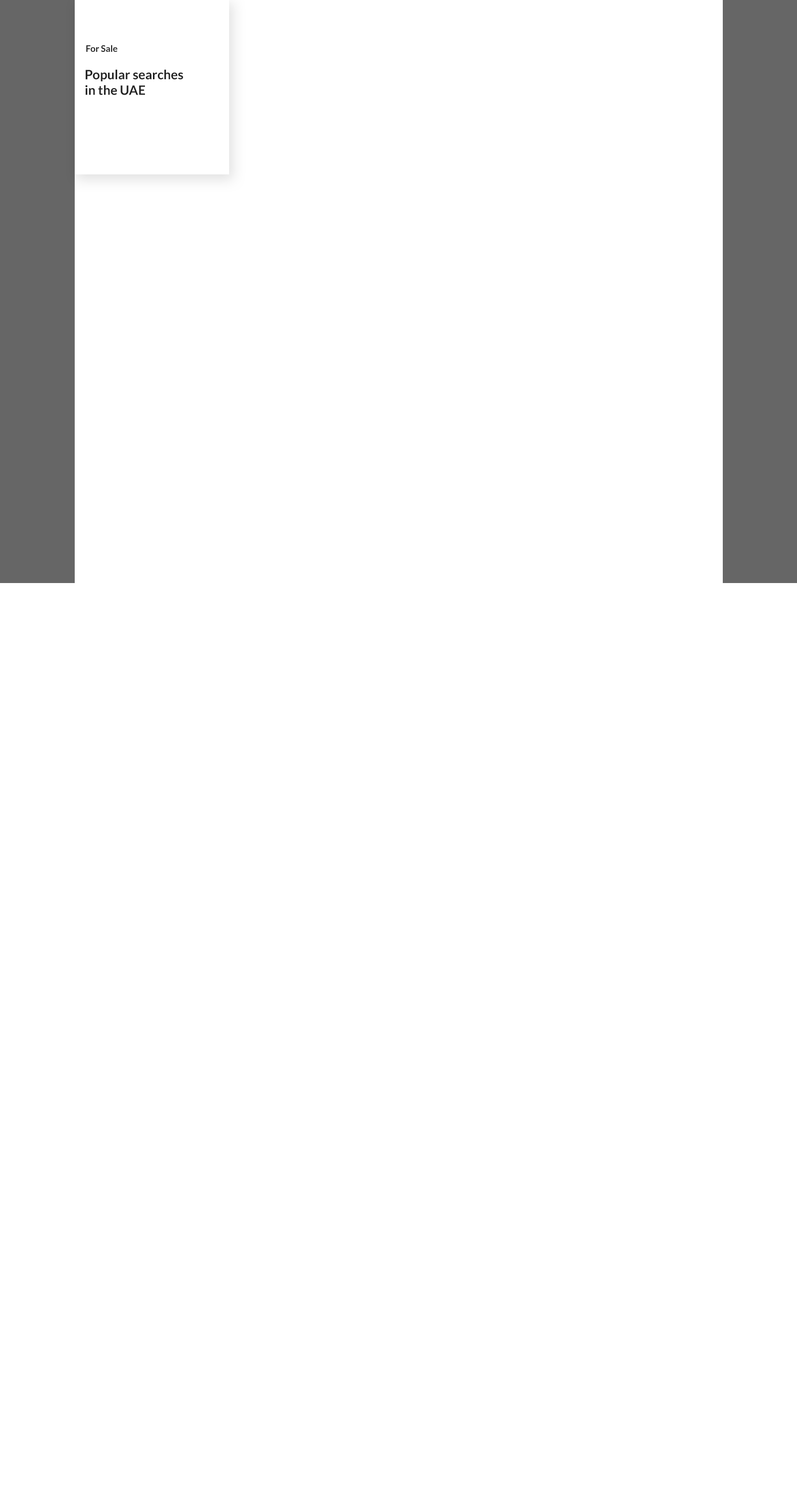
<style>
.page{position:relative;width:797px;height:1495px;background:#ffffff}
.page>*{position:absolute;margin:0}
.t1{font:9px "Lato-Bold";color:#222222}
.t2{font:13px "Lato-Bold";color:#222222}
</style>
<div class="page">
<p class="t1" style="left:86px;top:45px;width:32px;height:7px">For Sale</p>
<p class="t2" style="left:85px;top:69px;width:98px;height:26px">Popular searches <br>in the UAE</p>
</div>
